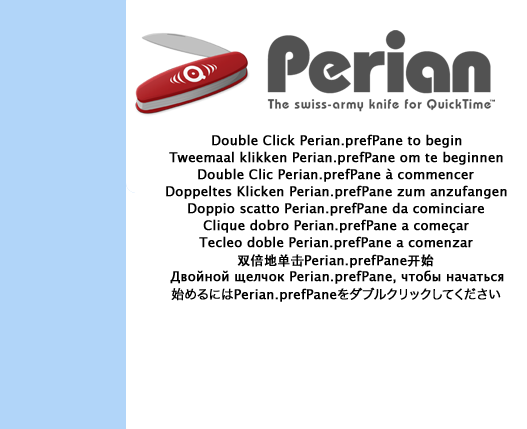
<style>
.page{position:relative;width:527px;height:429px;background:#ffffff}
.page>*{position:absolute;margin:0}
.t1{font:13px "LucidaGrande";color:#000000;font-weight:bold}
.t2{font:13px "STHeiti";color:#000000;font-weight:bold}
.t3{font:13px "HiraKakuPro-W3";color:#000000;font-weight:bold}
</style>
<div class="page">
<p class="t1" style="left:212px;top:134px;width:250px;height:14px">Double Click Perian.prefPane to begin</p>
<p class="t1" style="left:169px;top:151px;width:334px;height:14px">Tweemaal klikken Perian.prefPane om te beginnen</p>
<p class="t1" style="left:198px;top:168px;width:276px;height:14px">Double Clic Perian.prefPane à commencer</p>
<p class="t1" style="left:166px;top:185px;width:341px;height:14px">Doppeltes Klicken Perian.prefPane zum anzufangen</p>
<p class="t1" style="left:188px;top:202px;width:296px;height:14px">Doppio scatto Perian.prefPane da cominciare</p>
<p class="t1" style="left:203px;top:219px;width:266px;height:14px">Clique dobro Perian.prefPane a começar</p>
<p class="t1" style="left:199px;top:236px;width:274px;height:14px">Tecleo doble Perian.prefPane a comenzar</p>
<p class="t1" style="left:237px;top:254px;width:197px;height:14px"><span class="t2">双倍地单击</span>Perian.prefPane<span class="t2">开始</span></p>
<p class="t1" style="left:170px;top:270px;width:334px;height:14px">Двойной щелчок Perian.prefPane, чтобы начаться</p>
<p class="t1" style="left:171px;top:287px;width:330px;height:15px"><span class="t3">始めるには</span>Perian.prefPane<span class="t3">をダブルクリックしてください</span></p>
</div>
